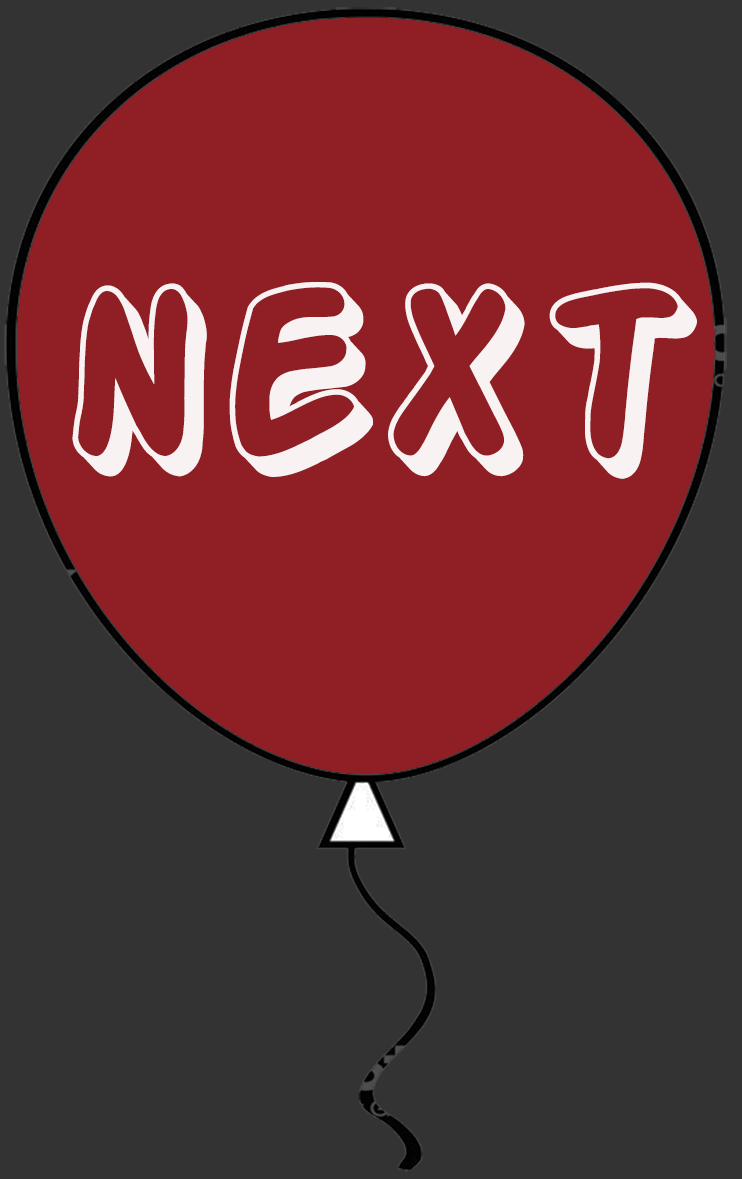
<style>
.page{position:relative;width:742px;height:1179px;background:#333333}
.page>*{position:absolute;margin:0}
.t1{font:250px "ActionManShaded";color:#f9f2f2}
</style>
<div class="page">
<p class="t1" style="left:72px;top:282px;width:625px;height:197px">next</p>
</div>
